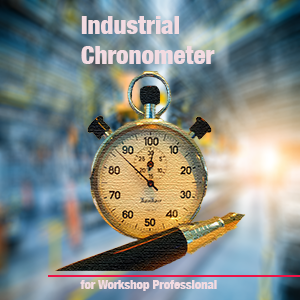
<style>
.page{position:relative;width:300px;height:300px}
.page>*{position:absolute;margin:0}
.t1{font:25px "HelveticaNeue-CondensedBlack";color:#f2dbe1}
.t2{font:12.5px "HelveticaNeue-CondensedBlack";color:#f2dbe1}
</style>
<div class="page">
<p class="t1" style="left:81px;top:16px;width:134px;height:48px">Industrial Chronometer</p>
<p class="t2" style="left:80px;top:280px;width:137px;height:11px">for Workshop Professional</p>
</div>
